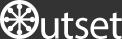
<style>
.page{position:relative;width:122px;height:39px;background:#333333}
.page>*{position:absolute;margin:0}
.t1{font:41.7px "MyriadPro-Regular";letter-spacing:-0.02em;color:#ffffff}
</style>
<div class="page">
<p class="t1" style="left:41px;top:12px;width:81px;height:27px">utset</p>
</div>
